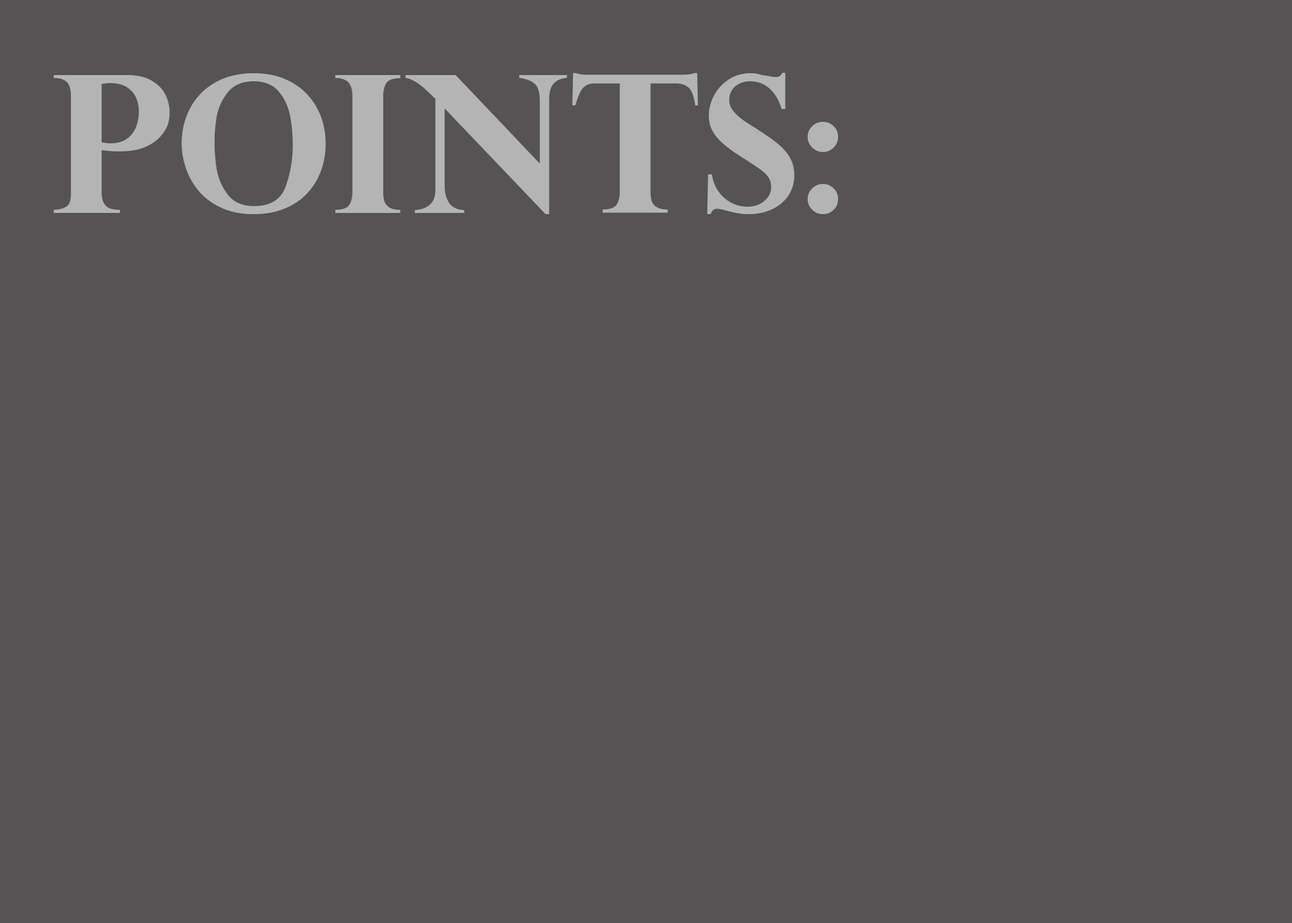
<style>
.page{position:relative;width:1292px;height:923px;background:#555353}
.page>*{position:absolute;margin:0}
.t1{font:192.3px "PerpetuaTitlingMT-Bold";color:#b4b4b4}
</style>
<div class="page">
<p class="t1" style="left:54px;top:73px;width:785px;height:141px">Points:</p>
</div>
